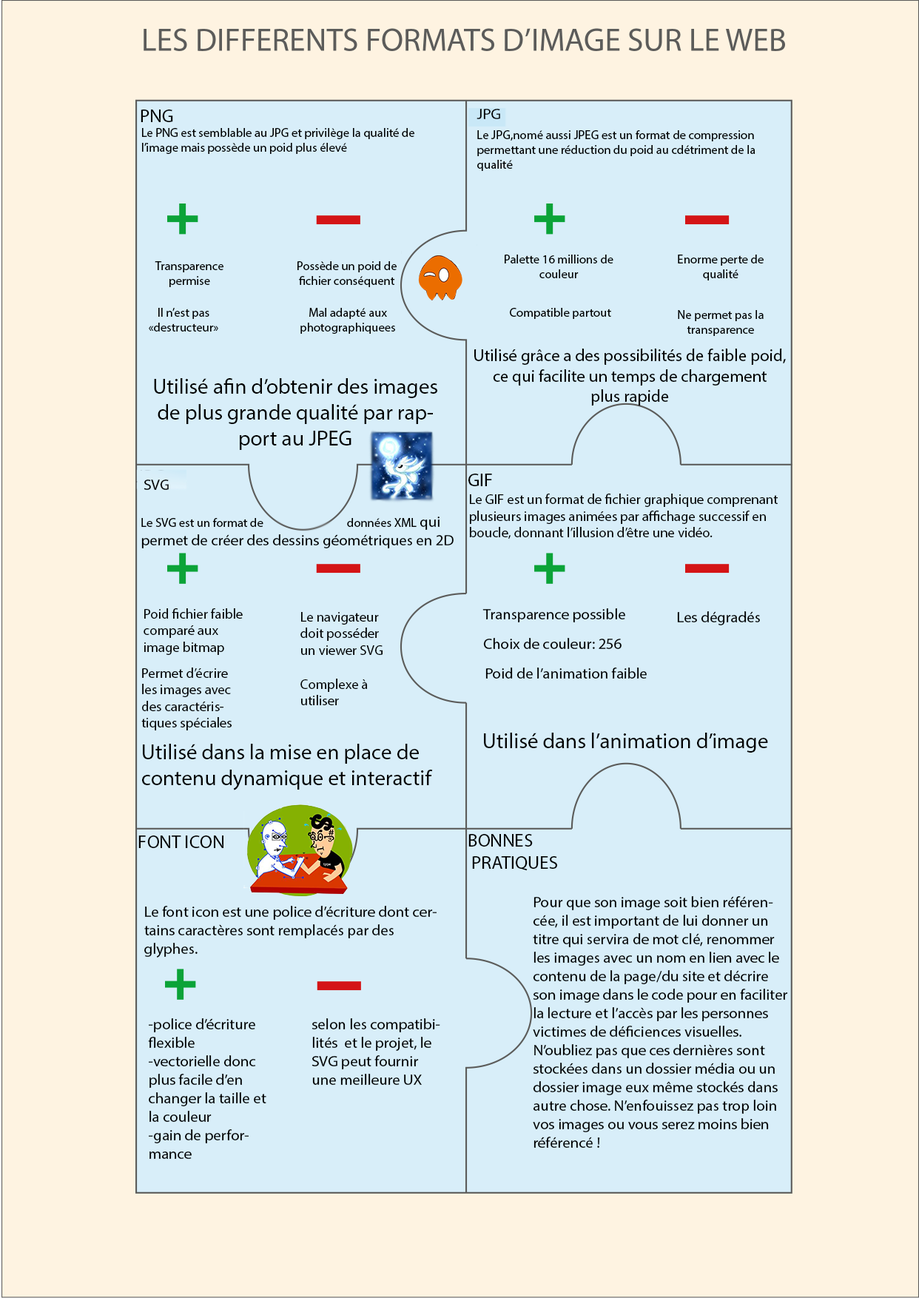
<style>
.page{position:relative;width:919px;height:1298px;background:#d8eef9}
.page>*{position:absolute;margin:0}
.t1{font:18.5px "MyriadPro-Regular";color:#000000}
.t2{font:15.4px "MyriadPro-Regular";color:#000000}
.t3{font:12.3px "MyriadPro-Regular";color:#000000}
.t4{font:17px "MyriadPro-Regular";color:#000000}
.t5{font:21.6px "MyriadPro-Regular";color:#000000}
.t6{font:13.9px "MyriadPro-Regular";color:#000000}
</style>
<div class="page">
<p class="t1" style="left:141px;top:109px;width:32px;height:13px">PNG</p>
<p class="t2" style="left:476px;top:109px;width:24px;height:10px">JPG</p>
<p class="t3" style="left:142px;top:128px;width:272px;height:26px">Le PNG est semblable au JPG et privilège la qualité de l’image mais possède un poid plus élevé</p>
<p class="t3" style="left:477px;top:130px;width:278px;height:41px">Le JPG,nomé aussi JPEG est un format de compression permettant une réduction du poid au cdétriment de la qualité</p>
<p class="t3" style="left:505px;top:255px;width:108px;height:23px;text-align:center">Palette 16 millions de couleur</p>
<p class="t3" style="left:678px;top:255px;width:86px;height:25px;text-align:center">Enorme perte de qualité</p>
<p class="t3" style="left:155px;top:261px;width:68px;height:26px;text-align:center">Transparence permise</p>
<p class="t3" style="left:297px;top:261px;width:100px;height:26px;text-align:center">Possède un poid de fichier conséquent</p>
<p class="t3" style="left:149px;top:308px;width:69px;height:23px;text-align:center">Il n’est pas «destructeur»</p>
<p class="t3" style="left:300px;top:308px;width:95px;height:26px;text-align:center">Mal adapté aux photographiquees</p>
<p class="t3" style="left:510px;top:308px;width:101px;height:11px">Compatible partout</p>
<p class="t3" style="left:678px;top:310px;width:86px;height:26px;text-align:center">Ne permet pas la transparence</p>
<p class="t4" style="left:474px;top:348px;width:312px;height:57px;text-align:center">Utilisé grâce a des possibilités de faible poid, ce qui facilite un temps de chargement                                                                  plus rapide</p>
<p class="t5" style="left:154px;top:378px;width:283px;height:72px;text-align:center">Utilisé afin d’obtenir des images de plus grande qualité par rapport au JPEG</p>
<p class="t1" style="left:468px;top:474px;width:24px;height:12px">GIF</p>
<p class="t2" style="left:144px;top:479px;width:25px;height:11px">SVG</p>
<p class="t6" style="left:470px;top:493px;width:308px;height:46px">Le GIF est un format de fichier graphique comprenant plusieurs images animées par affichage successif en boucle, donnant l’illusion d’être une vidéo.</p>
<p class="t3" style="left:141px;top:516px;width:313px;height:32px">Le SVG est un format de                                données XML <span class="t2">qui permet de créer des dessins géométriques en 2D</span></p>
<p class="t6" style="left:144px;top:608px;width:99px;height:47px">Poid fichier faible comparé aux image bitmap</p>
<p class="t6" style="left:300px;top:612px;width:83px;height:43px">Le navigateur doit posséder un viewer SVG</p>
<p class="t2" style="left:482px;top:608px;width:143px;height:14px">Transparence possible</p>
<p class="t2" style="left:677px;top:611px;width:83px;height:14px">Les dégradés</p>
<p class="t2" style="left:483px;top:638px;width:138px;height:11px">Choix de couleur: 256</p>
<p class="t6" style="left:141px;top:667px;width:91px;height:63px">Permet d’écrire les images avec des caractéristiques spéciales</p>
<p class="t2" style="left:485px;top:667px;width:162px;height:11px">Poid de l’animation faible</p>
<p class="t6" style="left:300px;top:678px;width:67px;height:27px">Complexe à utiliser</p>
<p class="t5" style="left:484px;top:732px;width:284px;height:20px">Utilisé dans l’animation d’image</p>
<p class="t5" style="left:142px;top:744px;width:291px;height:46px">Utilisé dans la mise en place de contenu dynamique et interactif</p>
<p class="t1" style="left:468px;top:834px;width:89px;height:37px">BONNES<br> PRATIQUES</p>
<p class="t1" style="left:138px;top:835px;width:85px;height:13px">FONT ICON</p>
<p class="t2" style="left:144px;top:906px;width:293px;height:51px">Le font icon est une police d’écriture dont certains caractères sont remplacés par des glyphes.</p>
<p class="t2" style="left:533px;top:896px;width:255px;height:252px">Pour que son image soit bien référencée, il est important de lui donner un titre qui servira de mot clé, renommer les images avec un nom en lien avec le contenu de la page/du site et décrire son image dans le code pour en faciliter la lecture et l’accès par les personnes victimes de déficiences visuelles. N’oubliez pas que ces dernières sont stockées dans un dossier média ou un dossier image eux même stockés dans autre chose. N’enfouissez pas trop loin vos images ou vous serez moins bien référencé !</p>
<p class="t2" style="left:148px;top:1018px;width:118px;height:141px">-police d’écriture flexible<br>-vectorielle donc plus facile d’en changer la taille et la couleur<br>-gain de performance</p>
<p class="t2" style="left:311px;top:1018px;width:129px;height:67px">selon les compatibilités  et le projet, le SVG peut fournir une meilleure UX</p>
</div>
